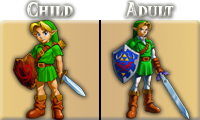
<style>
.page{position:relative;width:200px;height:120px}
.page>*{position:absolute;margin:0}
.t1{font:18px "HyliaSerifBeta-Regular";color:#ffffff}
</style>
<div class="page">
<p class="t1" style="left:27px;top:2px;width:46px;height:16px">Child</p>
<p class="t1" style="left:125px;top:2px;width:49px;height:15px">Adult</p>
</div>
